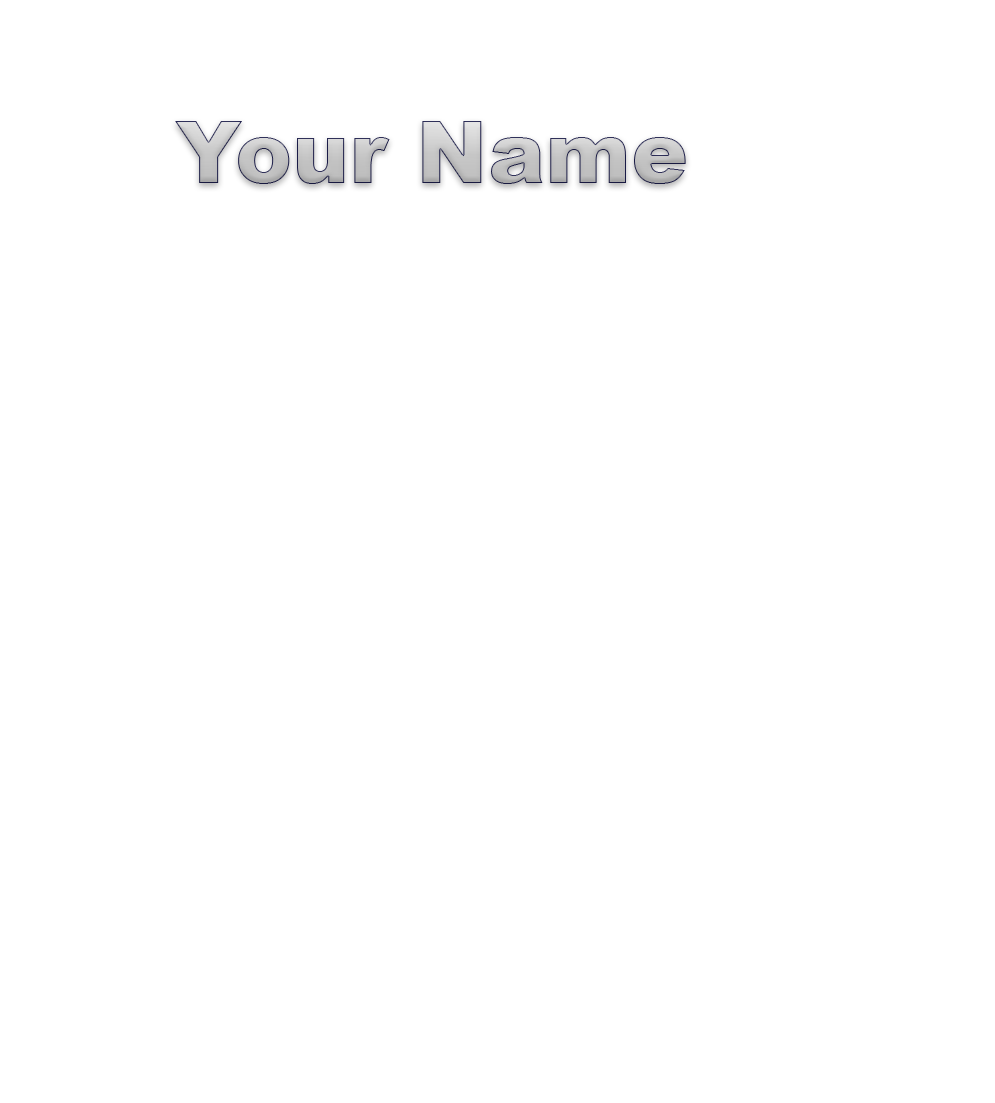
<style>
.page{position:relative;width:995px;height:1103px;background:#ffffff}
.page>*{position:absolute;margin:0}
.t1{font:85.9px "Arial-Black"}
</style>
<div class="page">
<p class="t1" style="left:175px;top:121px;width:511px;height:63px">Your Name</p>
</div>
